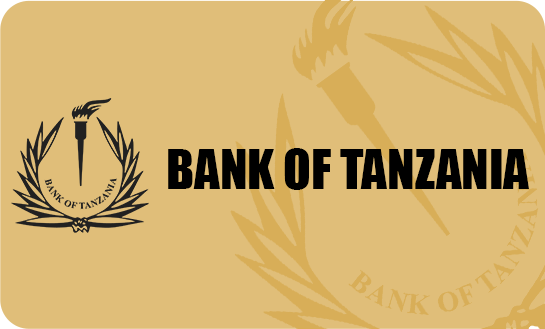
<style>
.page{position:relative;width:545px;height:329px;background:#e0be79}
.page>*{position:absolute;margin:0}
.t1{font:50.7px "Impact";color:#000000}
</style>
<div class="page">
<p class="t1" style="left:168px;top:148px;width:361px;height:42px">BANK OF TANZANIA</p>
</div>
